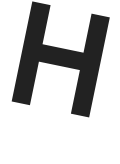
<style>
.page{position:relative;width:120px;height:164px;background:#ffffff}
.page>*{position:absolute;margin:0}
.t1{font:144px "Akkurat-Bold";color:#222222;text-transform:uppercase}
</style>
<div class="page">
<p class="t1" style="left:11px;top:1px;width:99px;height:117px;rotate:12deg">H</p>
</div>
